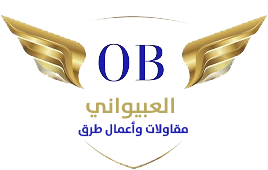
<style>
.page{position:relative;width:268px;height:170px;background:#ffffff}
.page>*{position:absolute;margin:0}
.t1{font:21.9px "TheSansArabic-Bold";color:#b8a85e}
.t2{font:12.2px "TheSansArabic-Bold";color:#1a1aae}
</style>
<div class="page">
<p class="t1" style="left:86px;top:97px;width:88px;height:22px">العبيواني</p>
<p class="t2" style="left:78px;top:121px;width:110px;height:16px">مقاولات وأعمال طرق</p>
</div>
